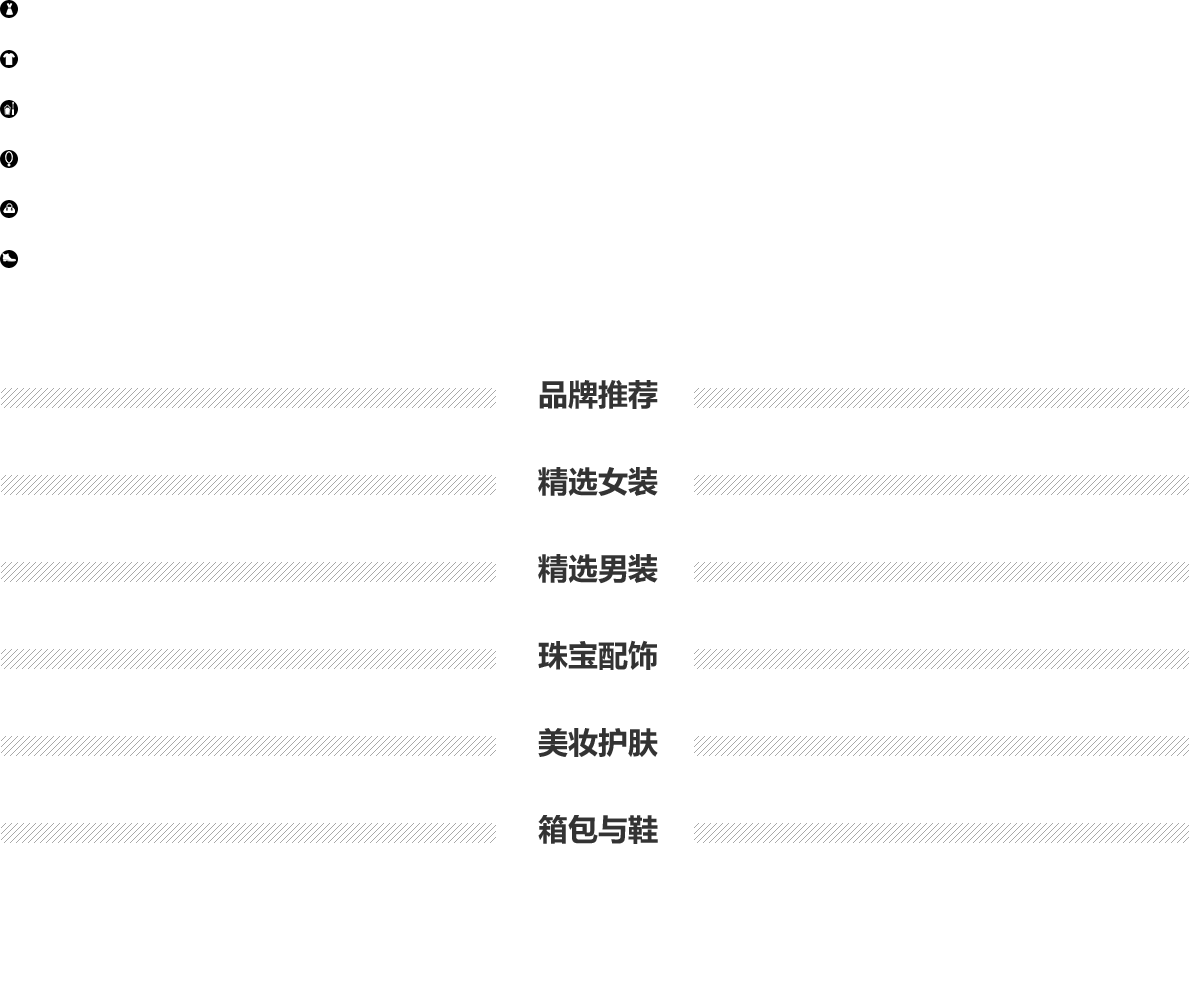
<style>
.page{position:relative;width:1190px;height:1000px;background:#ffffff}
.page>*{position:absolute;margin:0}
.t1{font:30px "MicrosoftYaHei-Bold";color:#333333;text-transform:uppercase}
</style>
<div class="page">
<p class="t1" style="left:539px;top:380px;width:119px;height:29px">品牌推荐</p>
<p class="t1" style="left:538px;top:467px;width:120px;height:29px">精选女装</p>
<p class="t1" style="left:538px;top:554px;width:120px;height:30px">精选男装</p>
<p class="t1" style="left:538px;top:640px;width:119px;height:30px">珠宝配饰</p>
<p class="t1" style="left:538px;top:728px;width:120px;height:29px">美妆护肤</p>
<p class="t1" style="left:538px;top:815px;width:120px;height:29px">箱包与鞋</p>
</div>
